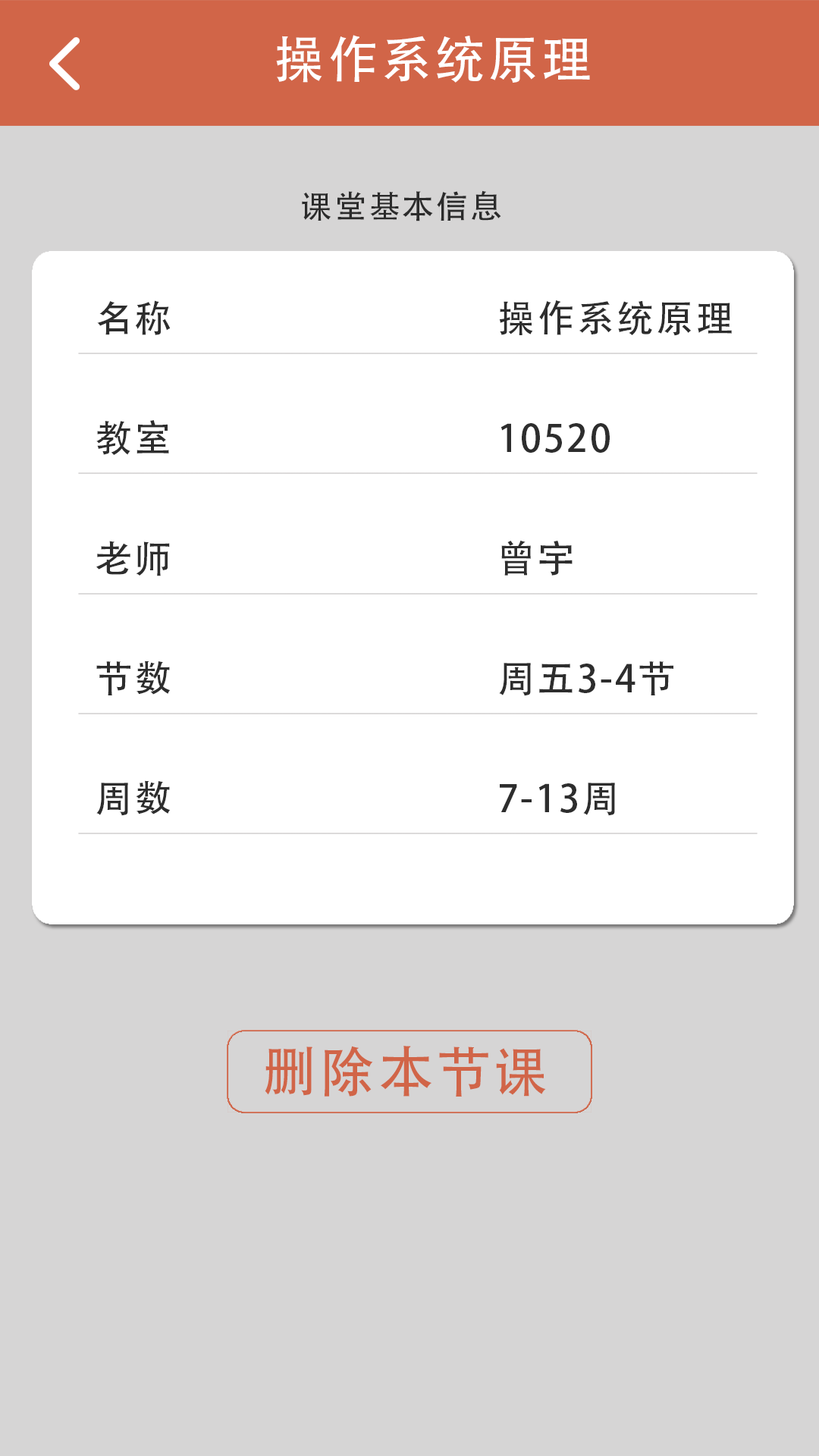
<style>
.page{position:relative;width:819px;height:1456px;background:#d6d5d5}
.page>*{position:absolute;margin:0}
.t1{font:50.8px "AdobeHeitiStd-Regular";letter-spacing:0.06em;color:#ffffff}
.t2{font:31.9px "AdobeHeitiStd-Regular";letter-spacing:0.06em;color:#2b2b2b}
.t3{font:37.6px "AdobeHeitiStd-Regular";letter-spacing:0.06em;color:#2d2d2d}
.t4{font:54.6px "AdobeHeitiStd-Regular";letter-spacing:0.06em;color:#d16548}
</style>
<div class="page">
<p class="t1" style="left:276px;top:35px;width:314px;height:48px">操作系统原理</p>
<p class="t2" style="left:302px;top:190px;width:199px;height:31px">课堂基本信息</p>
<p class="t3" style="left:97px;top:300px;width:74px;height:35px">名称</p>
<p class="t3" style="left:499px;top:300px;width:233px;height:36px">操作系统原理</p>
<p class="t3" style="left:96px;top:420px;width:73px;height:35px">教室</p>
<p class="t3" style="left:500px;top:423px;width:110px;height:30px">10520</p>
<p class="t3" style="left:96px;top:541px;width:74px;height:35px">老师</p>
<p class="t3" style="left:501px;top:540px;width:72px;height:36px">曾宇</p>
<p class="t3" style="left:96px;top:660px;width:75px;height:35px">节数</p>
<p class="t3" style="left:499px;top:661px;width:174px;height:35px">周五3-4节</p>
<p class="t3" style="left:96px;top:780px;width:75px;height:36px">周数</p>
<p class="t3" style="left:500px;top:783px;width:115px;height:33px">7-13周</p>
<p class="t4" style="left:265px;top:1046px;width:281px;height:51px">删除本节课</p>
</div>
